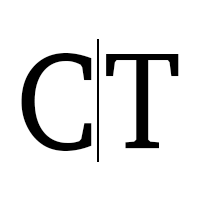
<style>
.page{position:relative;width:200px;height:200px;background:#ffffff}
.page>*{position:absolute;margin:0}
.t1{font:201.7px "Charter-Roman";color:#000000;font-variant:small-caps;scale:0.91 1}
</style>
<div class="page">
<p class="t1" style="left:21px;top:53px;width:158px;height:98px">c t</p>
</div>
